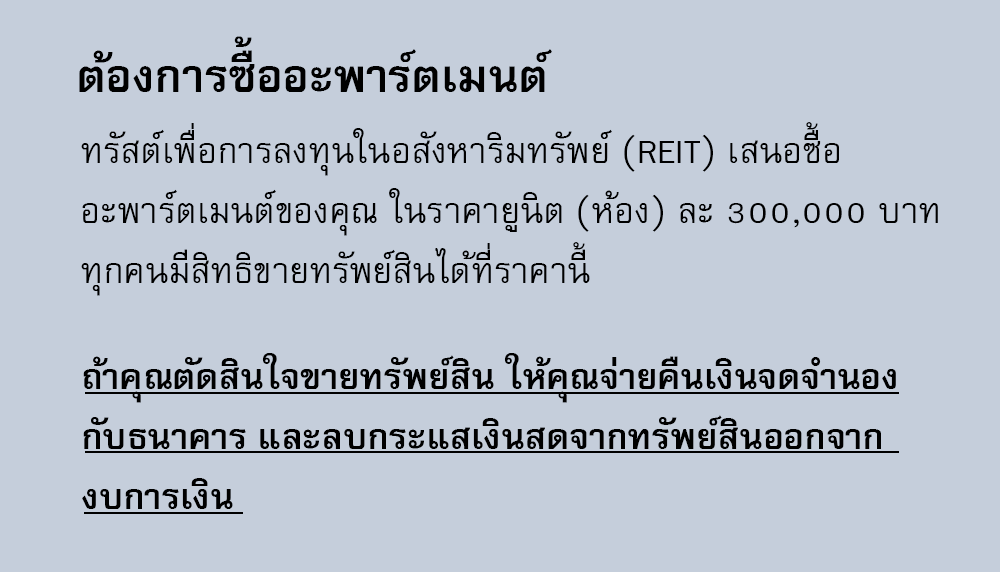
<style>
.page{position:relative;width:1000px;height:572px;background:#c5cedb}
.page>*{position:absolute;margin:0}
.t1{font:64px "FreesiaUPCBold";color:#000000}
.t2{font:50px/60px "FreesiaUPC";color:#000000}
.t3{font:50px/60px "FreesiaUPCBold";color:#000000}
</style>
<div class="page">
<p class="t1" style="left:79px;top:36px;width:473px;height:56px">ต้องการซื้ออะพาร์ตเมนต์</p>
<p class="t2" style="left:81px;top:122px;width:857px;height:174px">ทรัสต์เพื่อการลงทุนในอสังหาริมทรัพย์ (REIT) เสนอซื้อ<br>อะพาร์ตเมนต์ของคุณ ในราคายูนิต (ห้อง) ละ 300,000 บาท<br>ทุกคนมีสิทธิขายทรัพย์สินได้ที่ราคานี้</p>
<p class="t3" style="left:82px;top:353px;width:814px;height:156px">ถ้าคุณตัดสินใจขายทรัพย์สิน ให้คุณจ่ายคืนเงินจดจำนอง<br>กับธนาคาร และลบกระแสเงินสดจากทรัพย์สินออกจาก<br>งบการเงิน</p>
</div>
